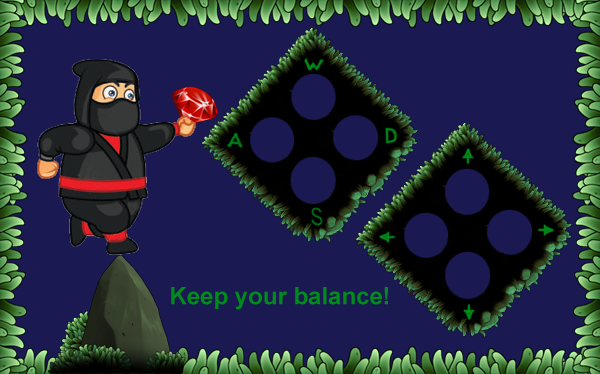
<style>
.page{position:relative;width:600px;height:374px;background:#1a1952}
.page>*{position:absolute;margin:0}
.t1{font:24px "Arial-BoldMT";color:#008b1a}
</style>
<div class="page">
<p class="t1" style="left:171px;top:287px;width:217px;height:23px">Keep your balance!</p>
</div>
